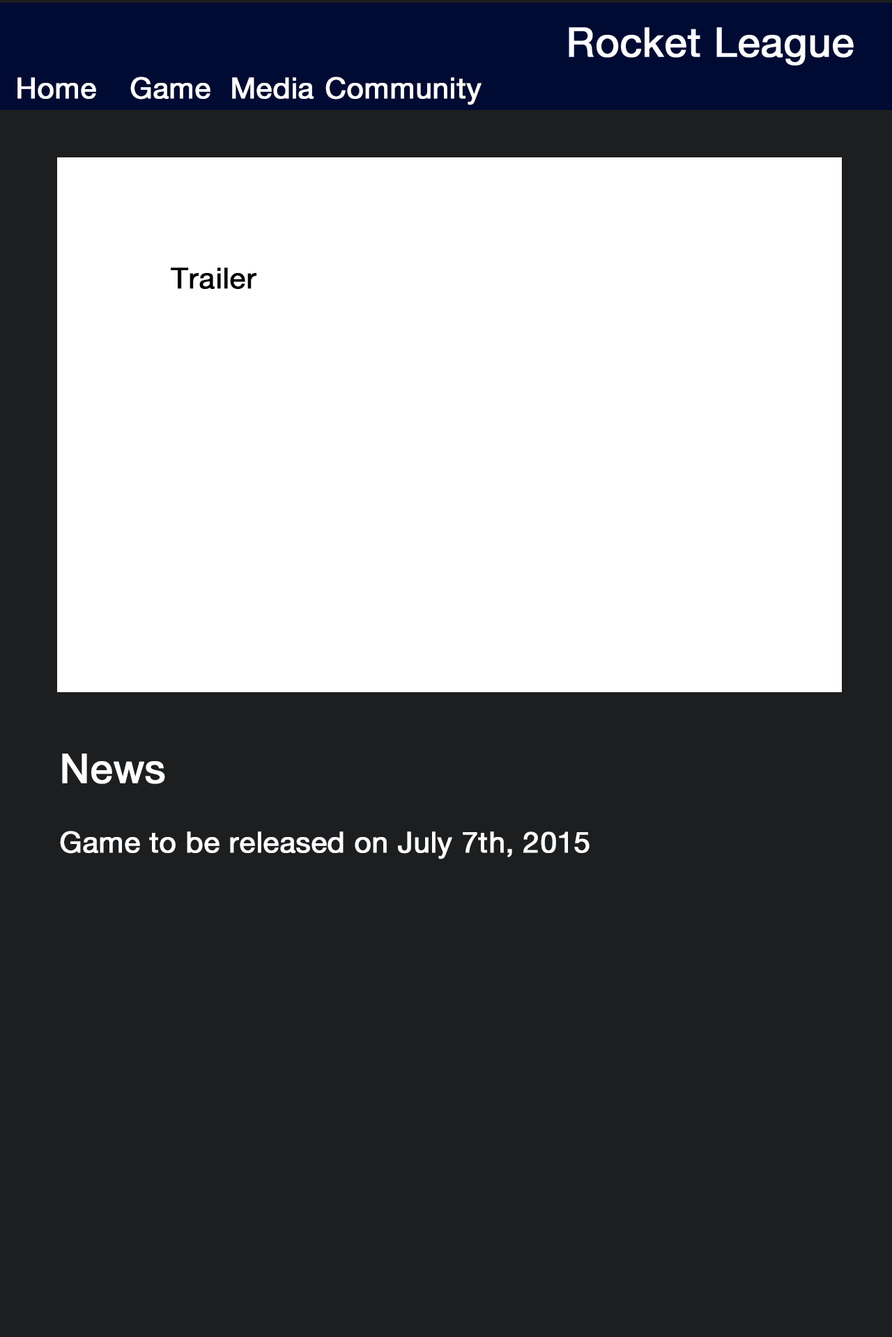
<style>
.page{position:relative;width:892px;height:1337px;background:#1d1e20}
.page>*{position:absolute;margin:0}
.t1{font:29px "HelveticaNeueLTPro-Roman";color:#ffffff;font-weight:bold}
.t2{font:29px "HelveticaNeueLTPro-Roman";color:#010101;font-weight:bold}
.t3{font:40.6px "HelveticaNeueLTPro-Roman";color:#ffffff;font-weight:bold}
</style>
<div class="page">
<p class="t1" style="left:17px;top:77px;width:79px;height:22px">Home</p>
<p class="t1" style="left:130px;top:77px;width:80px;height:23px">Game</p>
<p class="t1" style="left:232px;top:77px;width:81px;height:22px">Media</p>
<p class="t1" style="left:325px;top:77px;width:156px;height:28px">Community</p>
<p class="t2" style="left:171px;top:267px;width:85px;height:22px">Trailer</p>
<p class="t1" style="left:60px;top:754px;width:529px;height:106px"><span class="t3">News<br></span><br>Game to be released on July 7th, 2015</p>
</div>
